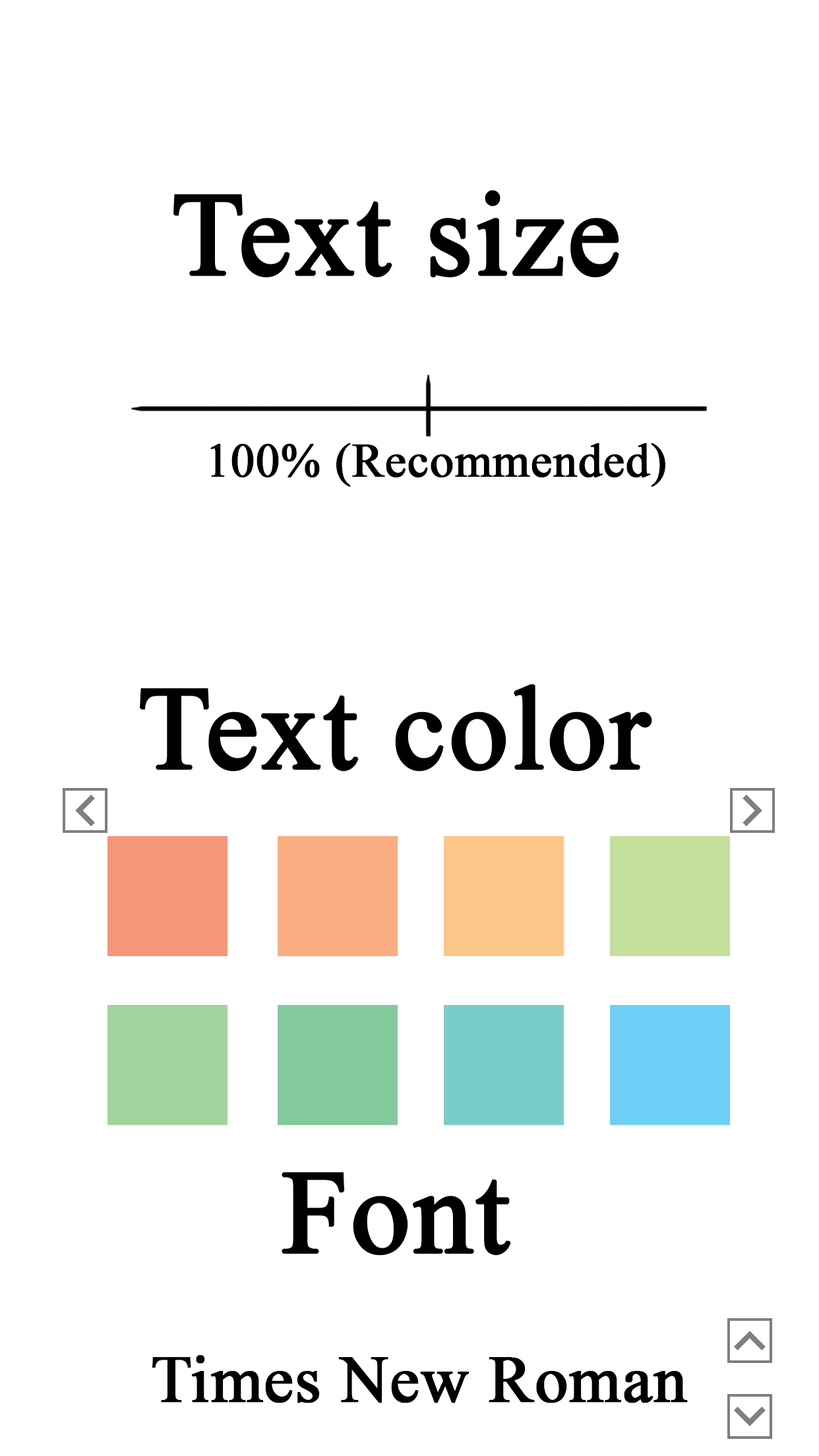
<style>
.page{position:relative;width:819px;height:1456px;background:#ffffff}
.page>*{position:absolute;margin:0}
.t1{font:47.5px "TimesNewRomanPSMT";color:#000000;font-weight:bold}
.t2{font:118.7px "TimesNewRomanPSMT";color:#000000;font-weight:bold}
.t3{font:65.9px "TimesNewRomanPSMT";color:#000000;font-weight:bold}
</style>
<div class="page">
<p class="t1" style="left:210px;top:443px;width:455px;height:44px">100% (Recommended)</p>
<p class="t2" style="left:139px;top:684px;width:513px;height:88px">Text color</p>
<p class="t2" style="left:282px;top:1172px;width:229px;height:84px">Font</p>
<p class="t3" style="left:152px;top:1355px;width:536px;height:48px">Times New Roman</p>
</div>
